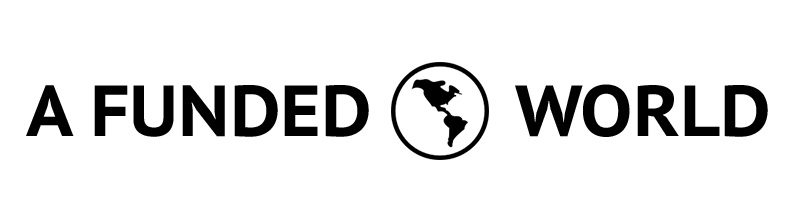
<style>
.page{position:relative;width:800px;height:200px;background:#ffffff}
.page>*{position:absolute;margin:0}
.t1{font:72px "PTSans-CaptionBold";color:#000000}
</style>
<div class="page">
<p class="t1" style="left:26px;top:85px;width:343px;height:52px">A FUNDED</p>
<p class="t1" style="left:515px;top:84px;width:253px;height:53px">WORLD</p>
</div>
